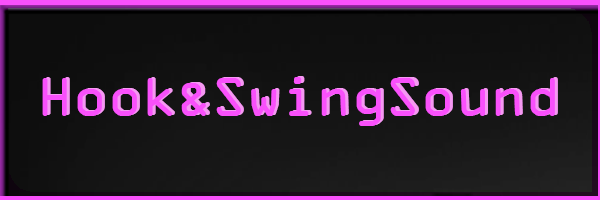
<style>
.page{position:relative;width:600px;height:200px}
.page>*{position:absolute;margin:0}
.t1{font:57.7px "OCRAExtended";color:#f950fb}
.t2{font:57.7px "OCRAExtended"}
</style>
<div class="page">
<p class="t1" style="left:42px;top:77px;width:513px;height:49px">Hook&amp;SwingSound</p>
<p class="t2" style="left:45px;top:76px;width:513px;height:49px">Hook&amp;SwingSound</p>
</div>
